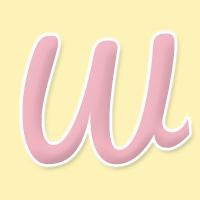
<style>
.page{position:relative;width:200px;height:200px;background:#fdf3b8}
.page>*{position:absolute;margin:0}
.t1{font:152.1px "Pacifico-Regular";color:#eeb3bf}
</style>
<div class="page">
<p class="t1" style="left:22px;top:33px;width:168px;height:132px">W</p>
</div>
